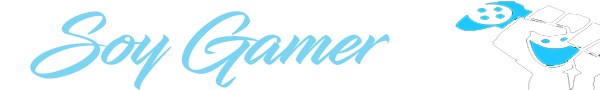
<style>
.page{position:relative;width:600px;height:90px;background:#ffffff}
.page>*{position:absolute;margin:0}
.t1{font:72px "InfiniteStroke-Bolder";color:#7bd4f2}
</style>
<div class="page">
<p class="t1" style="left:30px;top:11px;width:360px;height:79px">Soy Gamer</p>
</div>
